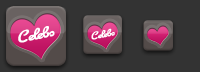
<style>
.page{position:relative;width:200px;height:72px;background:#333333}
.page>*{position:absolute;margin:0}
.t1{font:14px "Cuisine";letter-spacing:-0.045em;color:#ffffff}
.t2{font:9px "Cuisine";letter-spacing:-0.045em;color:#ffffff}
</style>
<div class="page">
<p class="t1" style="left:18px;top:26px;width:37px;height:17px;rotate:-11deg">Celebs</p>
<p class="t2" style="left:91px;top:28px;width:24px;height:12px;rotate:-11deg">Celebs</p>
</div>
